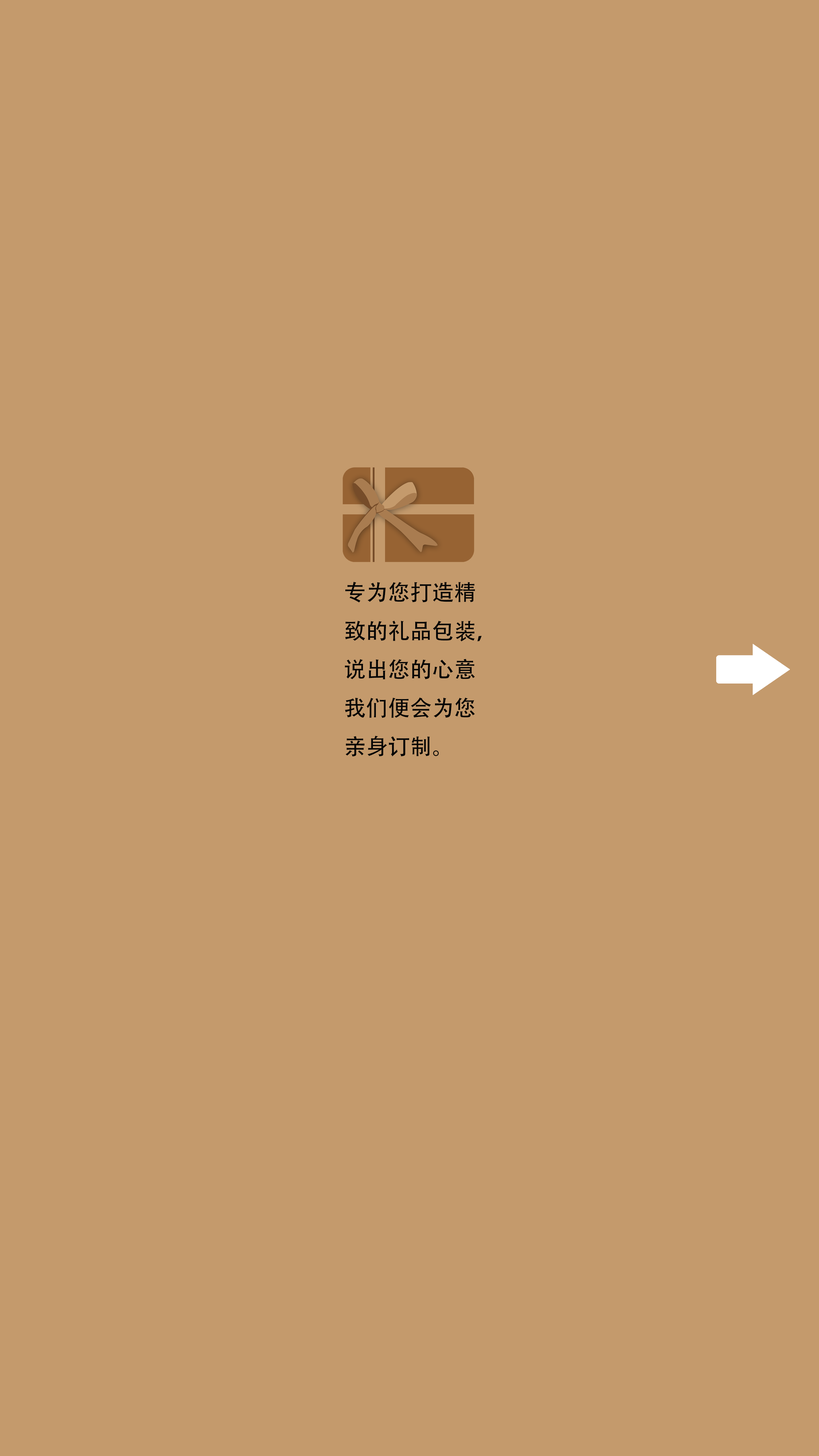
<style>
.page{position:relative;width:819px;height:1456px;background:#c49a6c}
.page>*{position:absolute;margin:0}
.t1{font:22px "AdobeHeitiStd-Regular";color:#050505}
</style>
<div class="page">
<p class="t1" style="left:345px;top:582px;width:136px;height:175px">专为您打造精<br>致的礼品包装，<br>说出您的心意<br>我们便会为您<br>亲身订制。</p>
</div>
